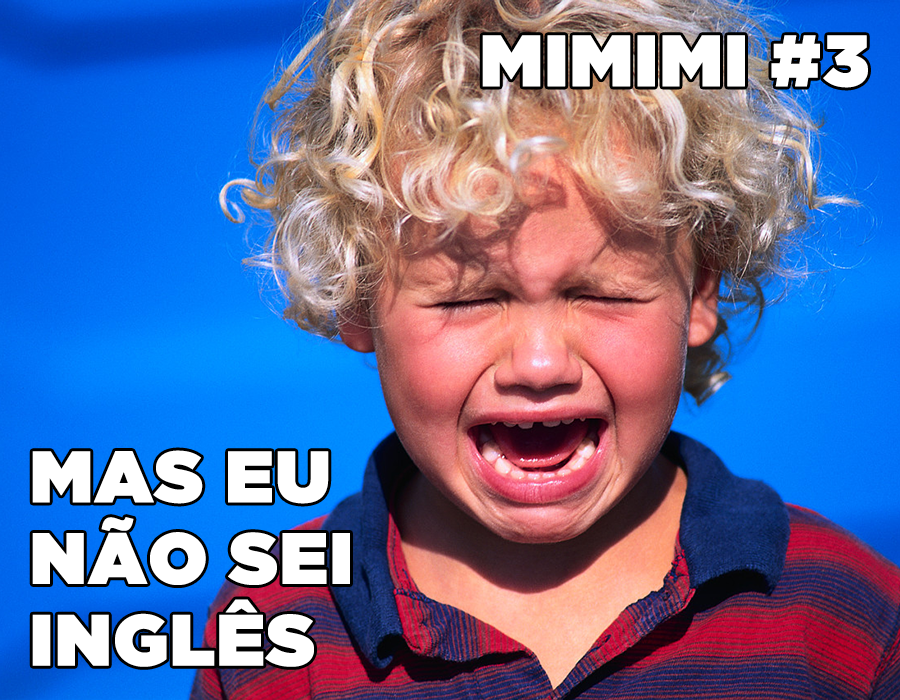
<style>
.page{position:relative;width:900px;height:700px}
.page>*{position:absolute;margin:0}
.t1{font:71.9px "GothamUltra";color:#ffffff;font-weight:bold}
.t2{font:71.9px/81.7px "GothamUltra";color:#ffffff;font-weight:bold}
</style>
<div class="page">
<p class="t1" style="left:482px;top:35px;width:386px;height:53px">MIMIMI #3</p>
<p class="t2" style="left:32px;top:450px;width:318px;height:217px">MAS EU<br>NÃO SEI<br>INGLÊS</p>
</div>
